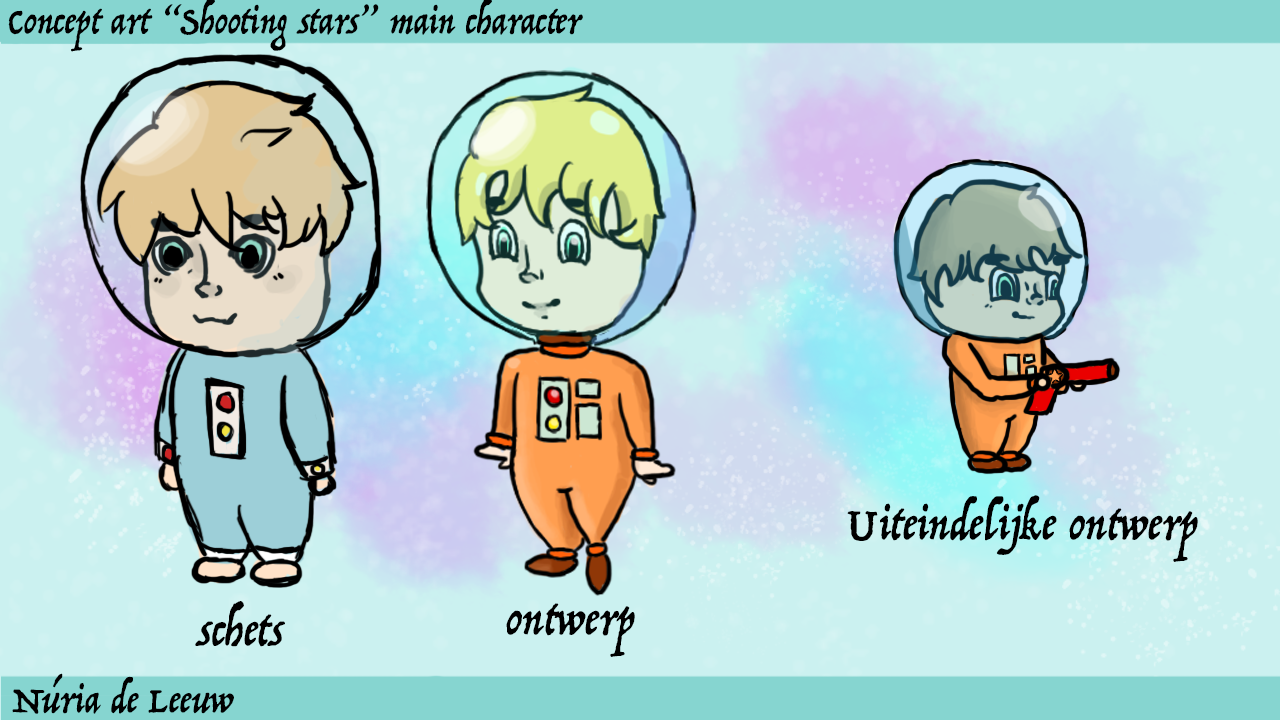
<style>
.page{position:relative;width:1280px;height:720px;background:#cbf1f0}
.page>*{position:absolute;margin:0}
.t1{font:48.8px "Trattatello";color:#000000}
.t2{font:40.1px "Trattatello";color:#000000}
</style>
<div class="page">
<p class="t1" style="left:847px;top:495px;width:351px;height:67px">Uiteindelijke ontwerp</p>
<p class="t1" style="left:195px;top:601px;width:90px;height:46px">schets</p>
<p class="t1" style="left:506px;top:603px;width:129px;height:54px">ontwerp</p>
<p class="t2" style="left:12px;top:673px;width:222px;height:41px">Núria de Leeuw</p>
</div>
